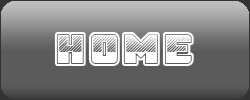
<style>
.page{position:relative;width:250px;height:100px;background:#5b5b5b}
.page>*{position:absolute;margin:0}
.t1{font:43px "SunsetGP";color:#ffffff}
</style>
<div class="page">
<p class="t1" style="left:54px;top:32px;width:140px;height:34px">Home</p>
</div>
